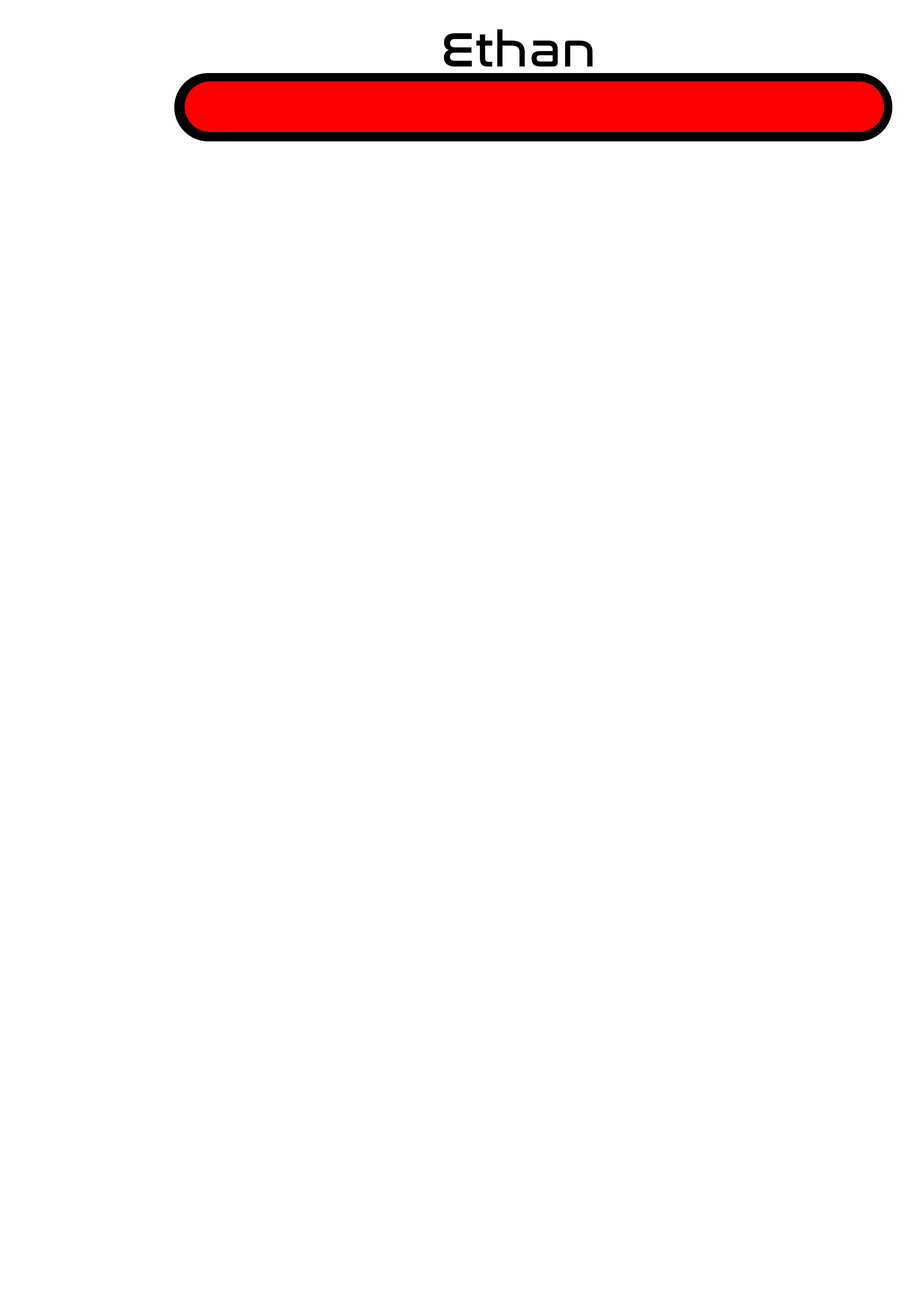
<style>
.page{position:relative;width:918px;height:1299px;background:#ffffff}
.page>*{position:absolute;margin:0}
.t1{font:49.1px "NasalizationRg-Regular";color:#000000}
</style>
<div class="page">
<p class="t1" style="left:444px;top:29px;width:149px;height:37px">Ethan</p>
</div>
